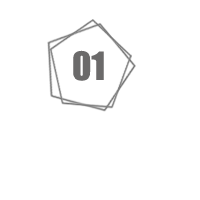
<style>
.page{position:relative;width:200px;height:200px;background:#ffffff}
.page>*{position:absolute;margin:0}
.t1{font:36px "Impact";color:#6b6a6a}
</style>
<div class="page">
<p class="t1" style="left:73px;top:50px;width:31px;height:31px">01</p>
</div>
